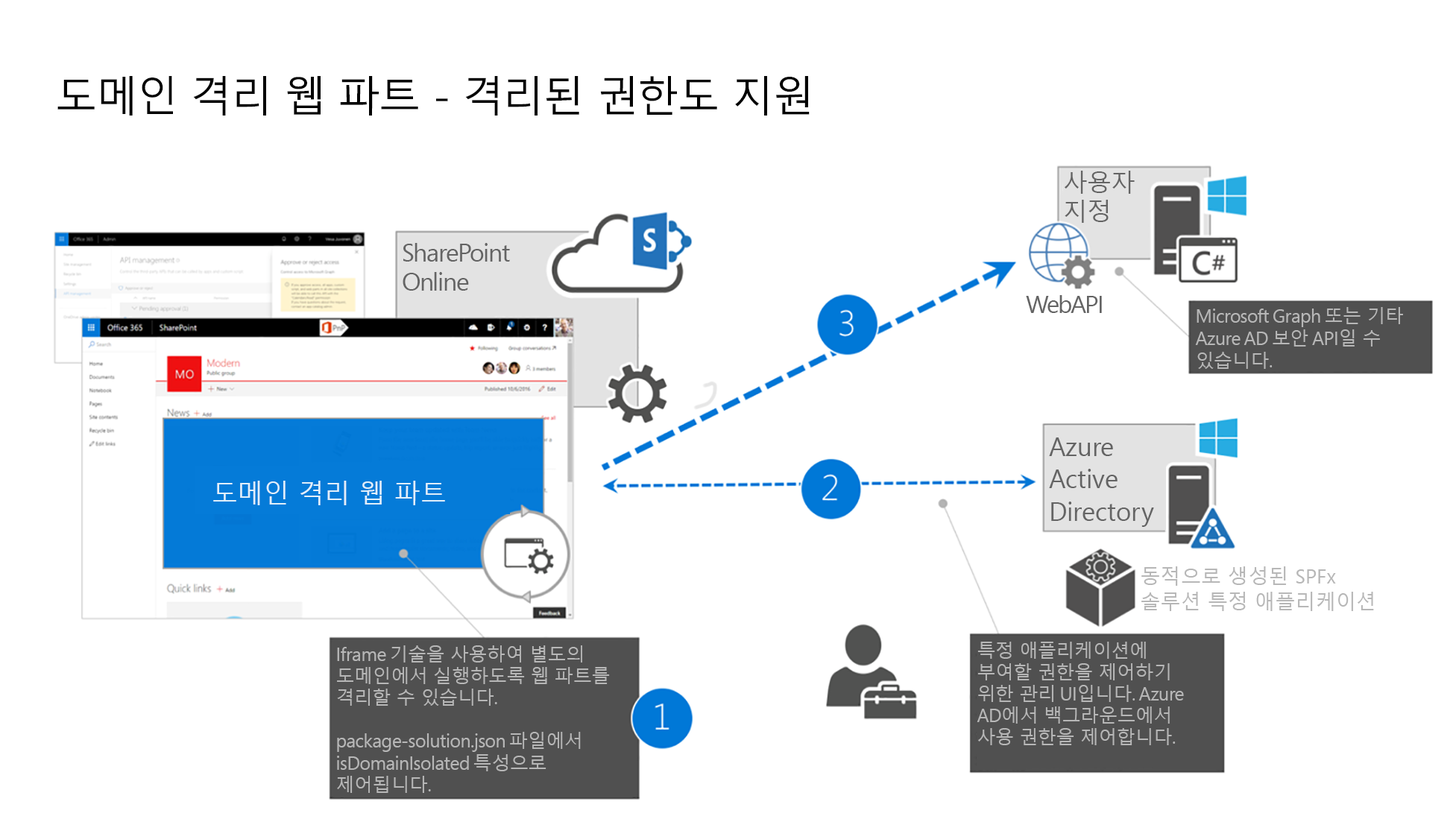
<style>
.page{position:relative;width:1456px;height:819px;background:#ffffff}
.page>*{position:absolute;margin:0}
.t1{font:41.9px "MalgunGothic";letter-spacing:-0.034em;color:#000000}
.t2{font:24.5px/28.9px "MalgunGothic";letter-spacing:-0.02em;color:#646464}
.t3{font:25px/29.5px "SegoePro";letter-spacing:-0.044em;color:#646464}
.t4{font:24.8px "SegoePro";letter-spacing:-0.064em;color:#646464}
.t5{font:18.6px "SegoePro";letter-spacing:-0.03em;color:#b7b7b7}
.t6{font:18.6px "MalgunGothic";letter-spacing:-0.03em;color:#b7b7b7}
.t7{font:26.1px/32.6px "SegoePro";letter-spacing:-0.01em;color:#646464}
.t8{font:25.9px "MalgunGothic";color:#e1effa}
.t9{font:20.2px/24.8px "MalgunGothic";letter-spacing:-0.01em;color:#b7b7b7}
.t10{font:20.2px/24.8px "SegoePro";letter-spacing:-0.01em;color:#b7b7b7}
.t11{font:18.6px/21.7px "MalgunGothic";letter-spacing:-0.03em;color:#b7b7b7}
.t12{font:18.6px/21.7px "SegoePro";letter-spacing:-0.03em;color:#b7b7b7}
.t13{font:18.6px/21.7px "MalgunGothicBold";letter-spacing:-0.03em;color:#b7b7b7}
</style>
<div class="page">
<p class="t1" style="left:57px;top:76px;width:752px;height:40px">도메인 격리 웹 파트 - 격리된 권한도 지원</p>
<p class="t2" style="left:1064px;top:171px;width:70px;height:52px">사용자 <br>지정</p>
<p class="t3" style="left:402px;top:243px;width:108px;height:48px">SharePoint Online</p>
<p class="t4" style="left:1026px;top:295px;width:76px;height:18px">WebAPI</p>
<p class="t5" style="left:1195px;top:307px;width:208px;height:62px">Microsoft Graph <span class="t6">또는 기타</span> Azure AD <span class="t6">보안</span> API<span class="t6">일 수 있습니다.</span></p>
<p class="t7" style="left:1049px;top:438px;width:105px;height:89px">Azure Active Directory</p>
<p class="t8" style="left:213px;top:481px;width:232px;height:24px">도메인 격리 웹 파트</p>
<p class="t9" style="left:1141px;top:566px;width:233px;height:45px">동적으로 생성된 <span class="t10">SPFx </span>솔루션 특정 애플리케이션</p>
<p class="t11" style="left:976px;top:642px;width:208px;height:103px">특정 애플리케이션에 부여할 권한을 제어하기 위한 관리<span class="t12"> UI</span>입니다.<span class="t12"> Azure AD</span>에서 백그라운드에서 사용 권한을 제어합니다.</p>
<p class="t11" style="left:337px;top:645px;width:273px;height:148px"><span class="t12">Iframe </span>기술을 사용하여 별도의 도메인에서 실행하도록 웹 파트를 격리할 수 있습니다. <br><span class="t13"><br></span><span class="t12">package-solution.json </span>파일에서 <span class="t12">isDomainIsolated </span>특성으로 제어됩니다.</p>
</div>
